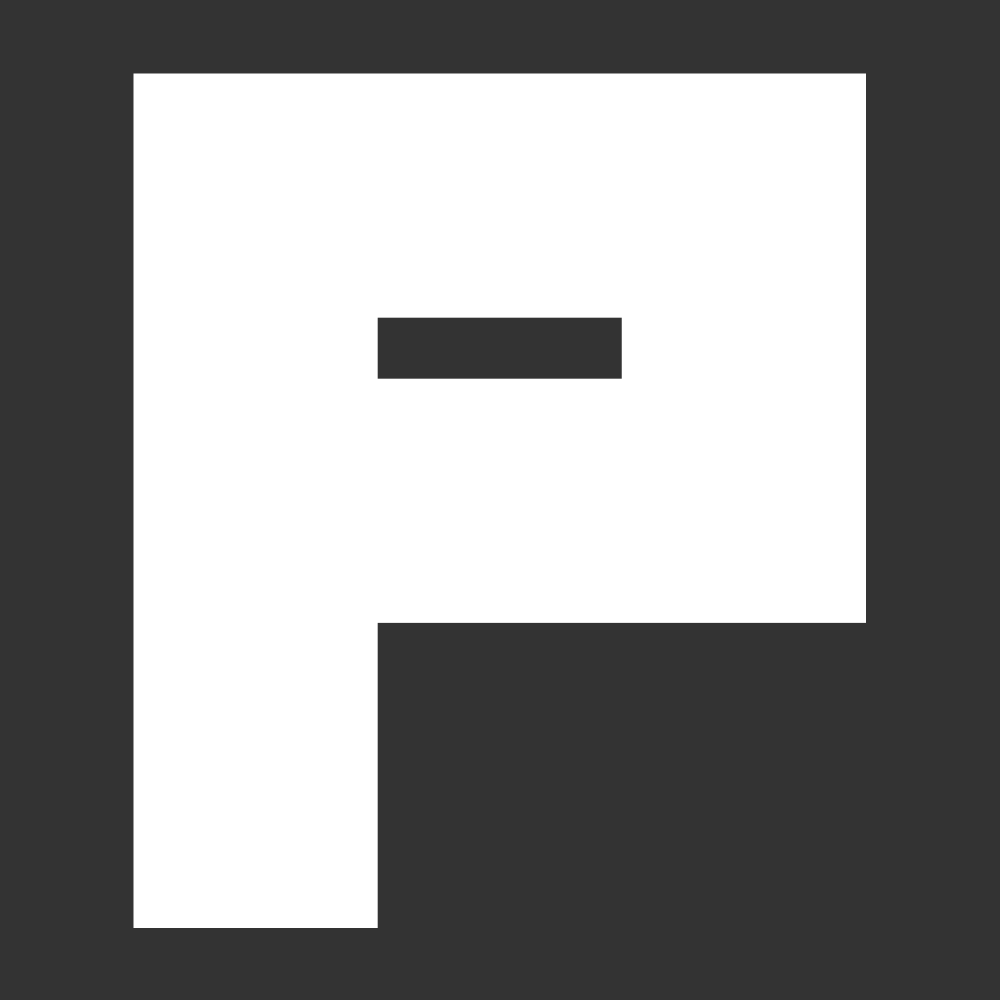
<style>
.page{position:relative;width:1000px;height:1000px;background:#333333}
.page>*{position:absolute;margin:0}
.t1{font:1250px "NeonOverdrive";letter-spacing:0.01em;color:#ffffff}
</style>
<div class="page">
<p class="t1" style="left:133px;top:73px;width:733px;height:855px">p</p>
</div>
